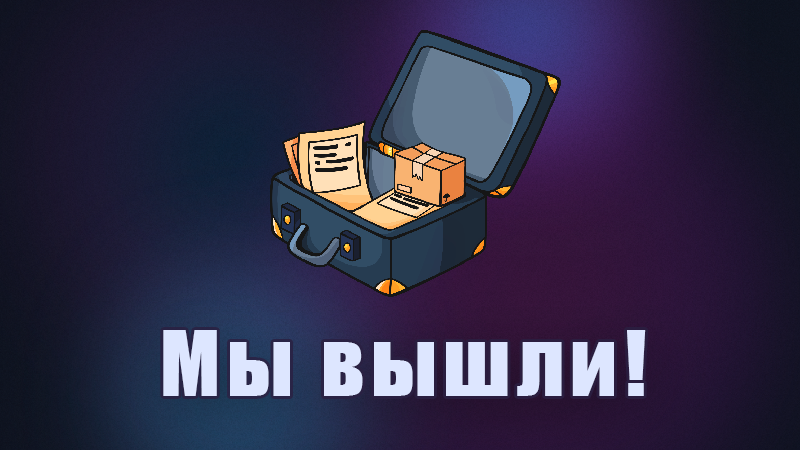
<style>
.page{position:relative;width:800px;height:450px}
.page>*{position:absolute;margin:0}
.t1{font:83.7px "Impact";letter-spacing:0.08em;color:#dde6ff}
</style>
<div class="page">
<p class="t1" style="left:163px;top:330px;width:483px;height:66px">Мы вышли!</p>
</div>
